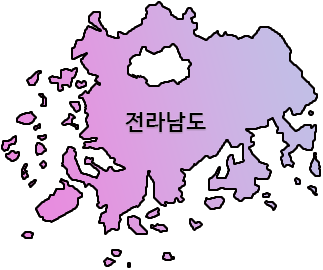
<style>
.page{position:relative;width:323px;height:270px;background:#ffffff}
.page>*{position:absolute;margin:0}
.t1{font:22px "HancomGothicBold";color:#000000}
</style>
<div class="page">
<p class="t1" style="left:125px;top:112px;width:81px;height:20px">전라남도</p>
</div>
